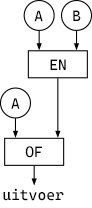
<style>
.page{position:relative;width:92px;height:208px;background:#ffffff}
.page>*{position:absolute;margin:0}
.t1{font:14.9px "CascadiaCode";color:#000000}
</style>
<div class="page">
<p class="t1" style="left:34px;top:10px;width:9px;height:12px">A</p>
<p class="t1" style="left:73px;top:10px;width:8px;height:11px">B</p>
<p class="t1" style="left:50px;top:59px;width:16px;height:11px">EN</p>
<p class="t1" style="left:11px;top:98px;width:9px;height:11px">A</p>
<p class="t1" style="left:25px;top:146px;width:17px;height:12px">OF</p>
<p class="t1" style="left:3px;top:188px;width:61px;height:13px">uitvoer</p>
</div>
